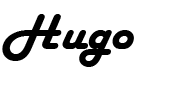
<style>
.page{position:relative;width:170px;height:100px;background:#ffffff}
.page>*{position:absolute;margin:0}
.t1{font:52.2px "HarlowSolid";color:#000000;scale:1.05 1}
</style>
<div class="page">
<p class="t1" style="left:2px;top:14px;width:132px;height:53px">Hugo</p>
</div>
